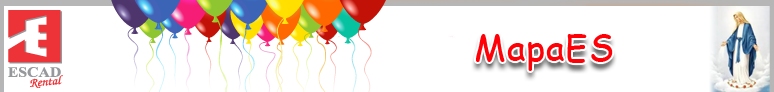
<style>
.page{position:relative;width:774px;height:92px;background:#ffffff}
.page>*{position:absolute;margin:0}
.t1{font:36px "ComicSansMS";letter-spacing:0.025em;color:#ff0007}
</style>
<div class="page">
<p class="t1" style="left:476px;top:34px;width:137px;height:37px">MapaES</p>
</div>
